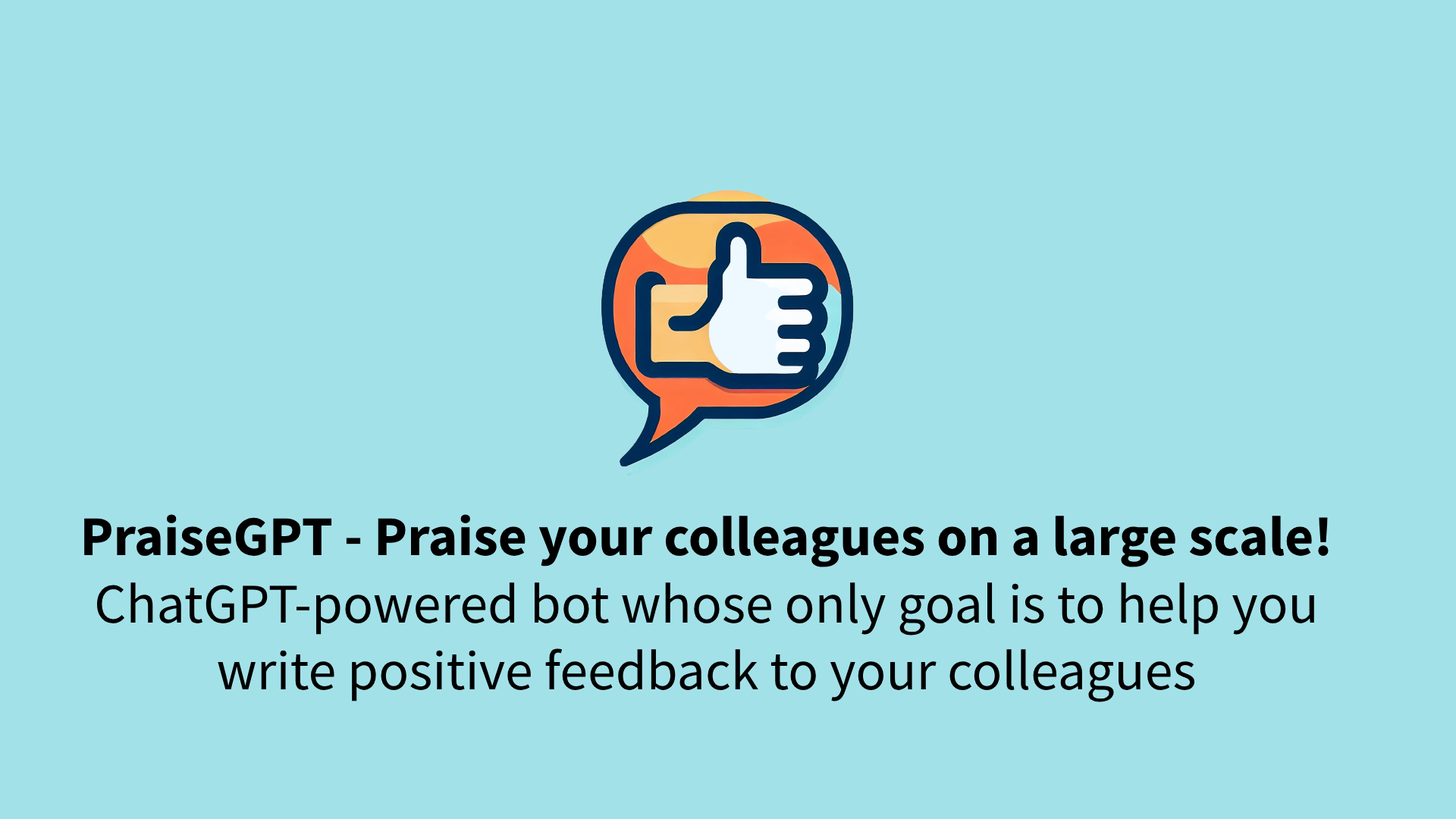
<style>
.page{position:relative;width:1456px;height:819px;background:#a3e1e9}
.page>*{position:absolute;margin:0}
.t1{font:56.1px "SourceSansPro-Regular";color:#000000}
.t2{font:56.1px "SourceSansPro-Bold";color:#000000}
</style>
<div class="page">
<p class="t1" style="left:84px;top:514px;width:1245px;height:188px;text-align:center"><span class="t2">PraiseGPT - Praise your colleagues on a large scale!<br></span>ChatGPT-powered bot whose only goal is to help you write positive feedback to your colleagues</p>
</div>
